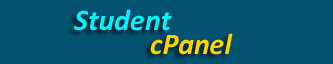
<style>
.page{position:relative;width:333px;height:64px;background:#025370}
.page>*{position:absolute;margin:0}
.t1{font:30px "Calibri-BoldItalic";color:#00f6ff}
.t2{font:30px "Calibri-BoldItalic";color:#ffd200}
</style>
<div class="page">
<p class="t1" style="left:74px;top:9px;width:98px;height:22px">Student</p>
<p class="t2" style="left:150px;top:33px;width:83px;height:22px">cPanel</p>
</div>
